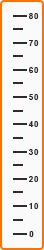
<style>
.page{position:relative;width:44px;height:250px;background:#fafafa}
.page>*{position:absolute;margin:0}
.t1{font:8px "Arial-BoldMT";letter-spacing:0.1em;color:#2a2a2a;text-transform:uppercase}
</style>
<div class="page">
<p class="t1" style="left:29px;top:13px;width:10px;height:6px">80</p>
<p class="t1" style="left:29px;top:40px;width:10px;height:6px">70</p>
<p class="t1" style="left:29px;top:67px;width:10px;height:6px">60</p>
<p class="t1" style="left:29px;top:94px;width:10px;height:6px">50</p>
<p class="t1" style="left:28px;top:121px;width:11px;height:6px">40</p>
<p class="t1" style="left:28px;top:149px;width:11px;height:6px">30</p>
<p class="t1" style="left:28px;top:176px;width:11px;height:6px">20</p>
<p class="t1" style="left:29px;top:203px;width:10px;height:6px">10</p>
<p class="t1" style="left:29px;top:231px;width:5px;height:6px">0</p>
</div>
